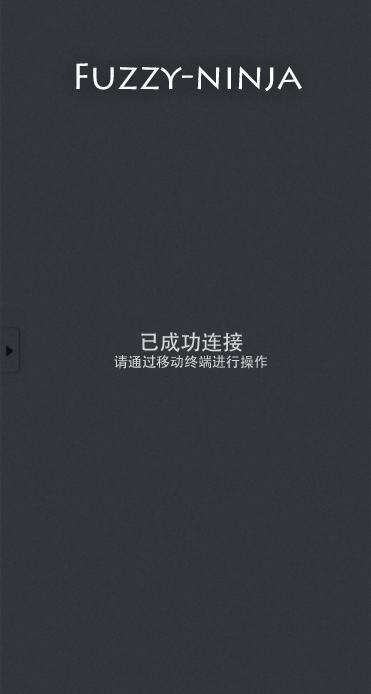
<style>
.page{position:relative;width:371px;height:694px;background:#33363b}
.page>*{position:absolute;margin:0}
.t1{font:36px "LithosPro-Regular";color:#fafafa}
.t2{font:14px "AdobeHeitiStd-Regular";color:#d7d7d7}
.t3{font:20.9px "AdobeHeitiStd-Regular";color:#d7d7d7}
</style>
<div class="page">
<p class="t1" style="left:76px;top:63px;width:226px;height:28px">Fuzzy-ninja</p>
<p class="t2" style="left:114px;top:332px;width:153px;height:37px;text-align:center"><span class="t3">已成功连接<br></span>请通过移动终端进行操作</p>
</div>
